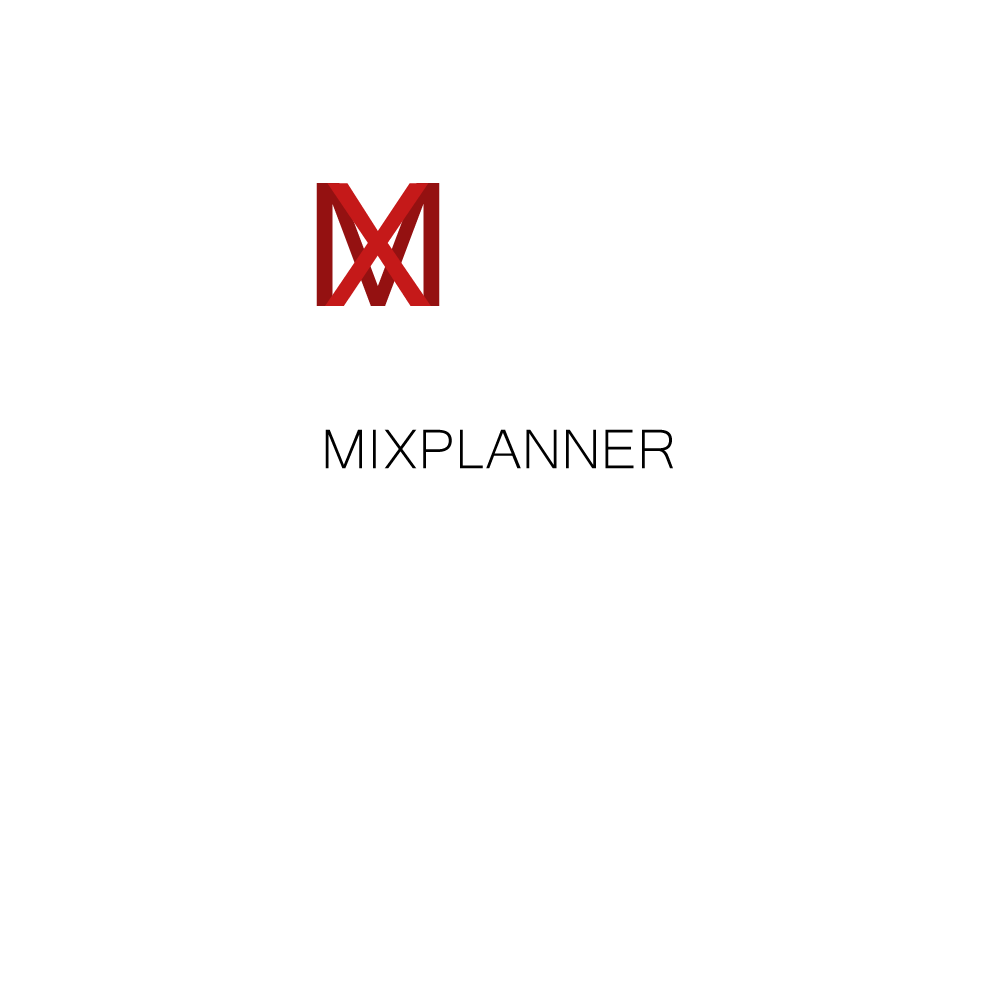
<style>
.page{position:relative;width:1000px;height:1000px;background:#ffffff}
.page>*{position:absolute;margin:0}
.t1{font:172px "HelveticaNeueLTStd-Roman";color:#941111;text-transform:uppercase}
.t2{font:172px "HelveticaNeueLTStd-Roman";color:#c51919;text-transform:uppercase}
.t3{font:72px "Microsoft-Yi-Baiti";color:#000000;text-transform:uppercase}
</style>
<div class="page">
<p class="t1" style="left:316px;top:183px;width:124px;height:123px">M</p>
<p class="t2" style="left:325px;top:183px;width:106px;height:123px">X</p>
<p class="t3" style="left:325px;top:429px;width:348px;height:40px">MixPlanner</p>
</div>
